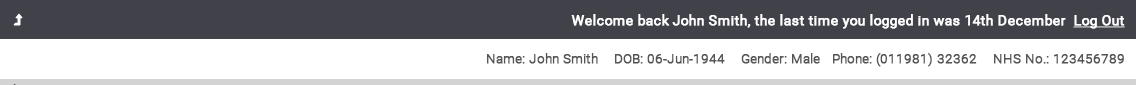
<style>
.page{position:relative;width:1136px;height:85px;background:#ffffff}
.page>*{position:absolute;margin:0}
.t1{font:14px "Roboto-Regular";color:#ffffff;font-weight:bold}
.t2{font:14px "Roboto-Regular";color:#ffffff;font-weight:bold;text-decoration:underline}
.t3{font:13px "Roboto-Light";color:#555555;font-weight:bold}
</style>
<div class="page">
<p class="t1" style="left:571px;top:14px;width:554px;height:15px">Welcome back John Smith, the last time you logged in was 14th December  <span class="t2">Log Out</span></p>
<p class="t3" style="left:487px;top:53px;width:637px;height:14px">Name: John Smith    DOB: 06-Jun-1944    Gender: Male   Phone: (011981) 32362    NHS No.: 123456789</p>
<p class="t3" style="left:13px;top:84px;width:3px;height:2px">.</p>
</div>
